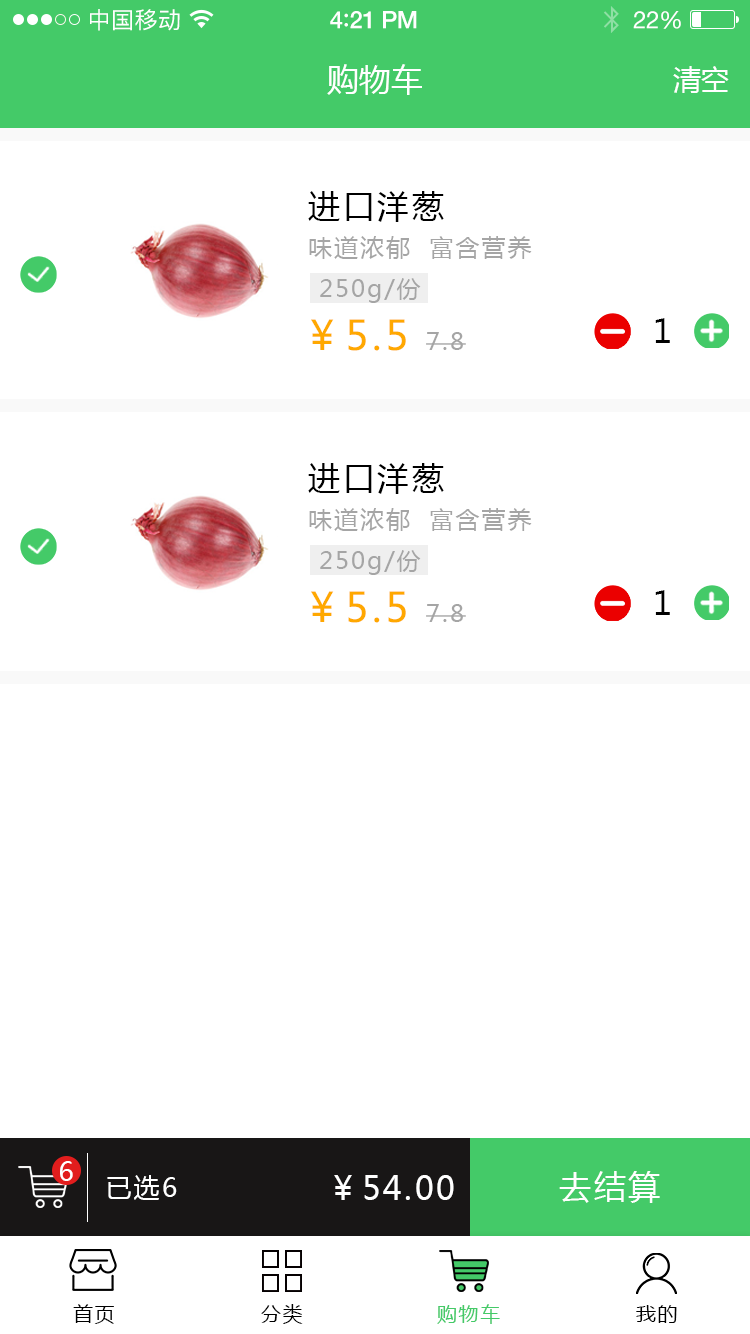
<style>
.page{position:relative;width:750px;height:1334px;background:#ffffff}
.page>*{position:absolute;margin:0}
.t1{font:23px "PingFangSC-Regular";letter-spacing:0.02em;color:#ffffff}
.t2{font:24px "HelveticaNeue-Medium";letter-spacing:-0.02em;color:#ffffff}
.t3{font:26px "Avenir-Medium";letter-spacing:-0.02em;color:#ffffff}
.t4{font:24px "HelveticaNeue";letter-spacing:-0.02em;color:#ffffff}
.t5{font:32px "MicrosoftYaHei";color:#ffffff;text-transform:uppercase}
.t6{font:28px "MicrosoftYaHei";color:#ffffff;text-transform:uppercase}
.t7{font:32px "MicrosoftYaHei";letter-spacing:0.08em;color:#000000;text-transform:uppercase}
.t8{font:24px "MicrosoftYaHei";letter-spacing:0.08em;color:#a5a5a5;text-transform:uppercase}
.t9{font:24px "MicrosoftYaHei";letter-spacing:0.08em;color:#a5a5a5}
.t10{font:40.4px "MicrosoftYaHei";letter-spacing:0.08em;color:#ffa800;text-transform:uppercase}
.t11{font:26px "MicrosoftYaHei";letter-spacing:0.08em;color:#ffffff;text-transform:uppercase}
.t12{font:32px "MicrosoftYaHei";letter-spacing:0.08em;color:#ffffff;text-transform:uppercase}
.t13{font:20px "MicrosoftYaHei";letter-spacing:0.08em;color:#000000;text-transform:uppercase}
.t14{font:20px "MicrosoftYaHei";letter-spacing:0.08em;color:#44ca68;text-transform:uppercase}
</style>
<div class="page">
<p class="t1" style="left:90px;top:9px;width:90px;height:22px">中国移动</p>
<p class="t2" style="left:330px;top:11px;width:87px;height:18px">4<span class="t3">:</span>21 PM</p>
<p class="t4" style="left:633px;top:11px;width:48px;height:18px">22%</p>
<p class="t5" style="left:327px;top:64px;width:95px;height:31px">购物车</p>
<p class="t6" style="left:673px;top:66px;width:56px;height:27px">清空</p>
<p class="t7" style="left:308px;top:191px;width:136px;height:31px">进口洋葱</p>
<p class="t8" style="left:309px;top:236px;width:223px;height:23px">味道浓郁  富含营养</p>
<p class="t9" style="left:320px;top:278px;width:101px;height:25px">250g/份</p>
<p class="t7" style="left:655px;top:318px;width:15px;height:25px">1</p>
<p class="t10" style="left:311px;top:319px;width:95px;height:32px">￥5.5</p>
<p class="t9" style="left:426px;top:332px;width:40px;height:18px">7.8</p>
<p class="t7" style="left:308px;top:463px;width:136px;height:31px">进口洋葱</p>
<p class="t8" style="left:309px;top:508px;width:223px;height:23px">味道浓郁  富含营养</p>
<p class="t9" style="left:320px;top:550px;width:101px;height:25px">250g/份</p>
<p class="t10" style="left:311px;top:591px;width:95px;height:32px">￥5.5</p>
<p class="t7" style="left:655px;top:590px;width:15px;height:25px">1</p>
<p class="t9" style="left:426px;top:604px;width:40px;height:18px">7.8</p>
<p class="t11" style="left:60px;top:1161px;width:13px;height:20px">6</p>
<p class="t11" style="left:107px;top:1175px;width:70px;height:25px">已选6</p>
<p class="t12" style="left:334px;top:1175px;width:120px;height:25px">￥54.00</p>
<p class="t12" style="left:559px;top:1171px;width:101px;height:32px">去结算</p>
<p class="t13" style="left:73px;top:1304px;width:41px;height:20px">首页</p>
<p class="t13" style="left:261px;top:1304px;width:42px;height:20px">分类</p>
<p class="t14" style="left:437px;top:1304px;width:63px;height:20px">购物车</p>
<p class="t13" style="left:636px;top:1305px;width:41px;height:18px">我的</p>
</div>
